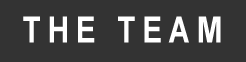
<style>
.page{position:relative;width:246px;height:62px;background:#333333}
.page>*{position:absolute;margin:0}
.t1{font:36.3px "Arial-BoldMT";letter-spacing:0.22em;color:#ffffff;scale:0.83 1}
</style>
<div class="page">
<p class="t1" style="left:23px;top:16px;width:198px;height:27px">THE TEAM</p>
</div>
